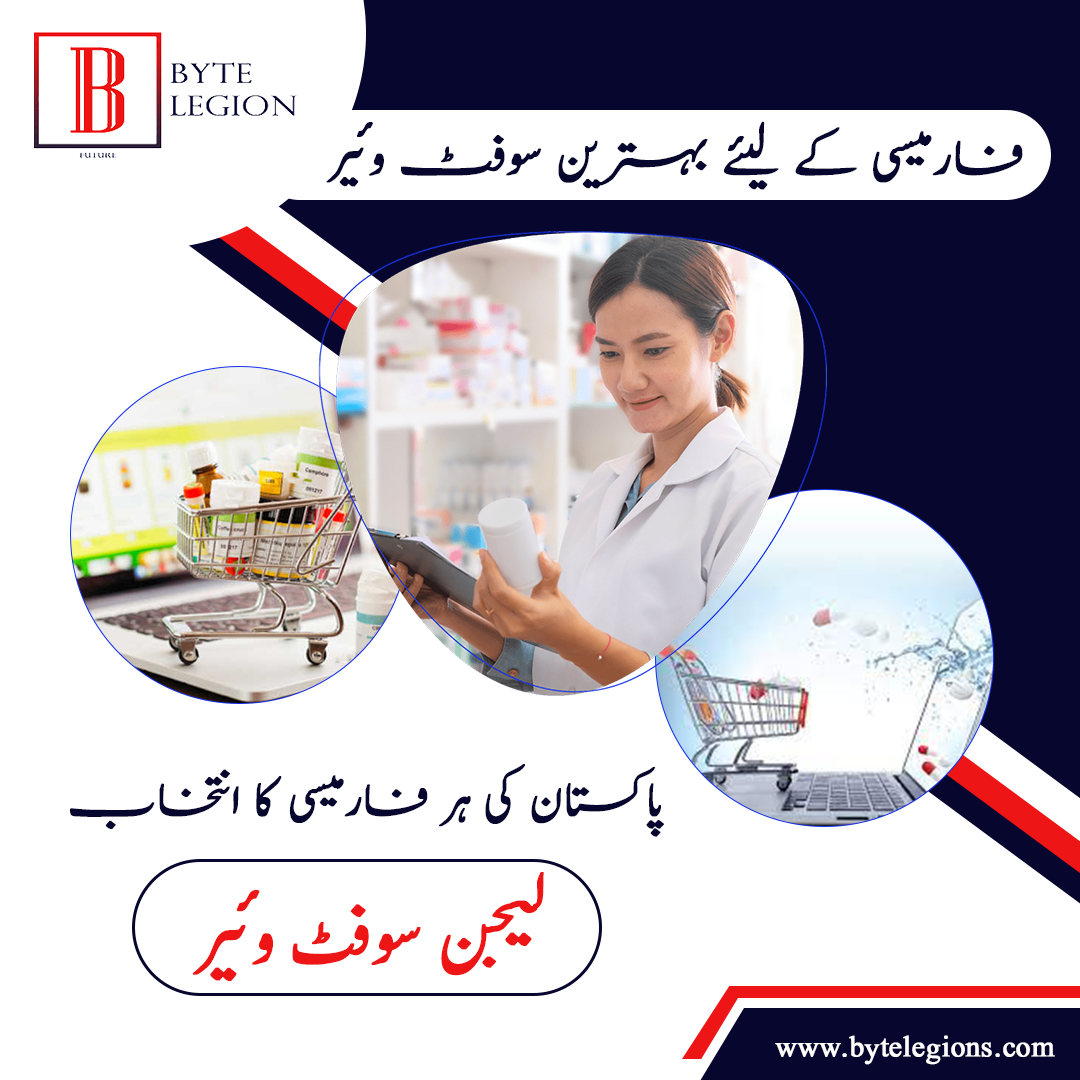
<style>
.page{position:relative;width:1080px;height:1080px;background:#ffffff}
.page>*{position:absolute;margin:0}
.t1{font:59.3px "Jameel-Noori-Nastaleeq-Kasheeda";color:#07062e;text-transform:uppercase;font-weight:bold}
.t2{font:55px "Jameel-Noori-Nastaleeq-Kasheeda";color:#07062e;text-transform:uppercase;font-weight:bold}
.t3{font:84.3px "Jameel-Noori-Nastaleeq";letter-spacing:-0.015em;color:#ed1515;text-transform:uppercase;font-weight:bold}
.t4{font:35.9px "Jameel-Noori-Nastaleeq";letter-spacing:-0.015em;color:#fefeff;font-weight:bold}
</style>
<div class="page">
<p class="t1" style="left:326px;top:121px;width:697px;height:69px">فارمیسی کے لیئے بہترین سوفٹ وئیر</p>
<p class="t2" style="left:70px;top:764px;width:594px;height:73px">پاکستان کی ہر فارمیسی کا انتخاب</p>
<p class="t3" style="left:192px;top:872px;width:352px;height:109px">لیجن سوفٹ وئیر</p>
<p class="t4" style="left:775px;top:1035px;width:280px;height:30px">www.bytelegions.com</p>
</div>
